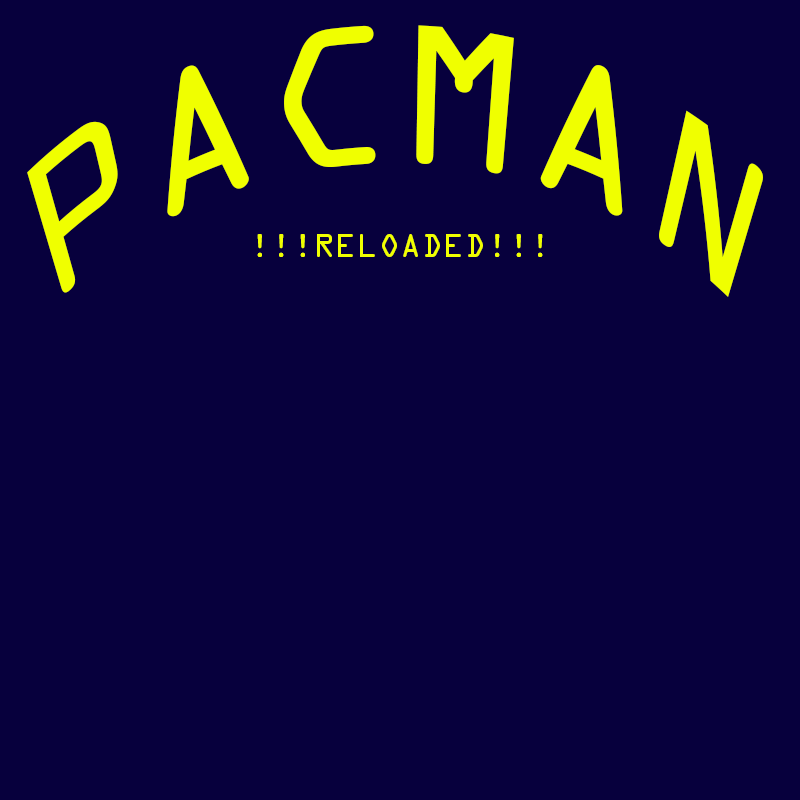
<style>
.page{position:relative;width:800px;height:800px;background:#07003d}
.page>*{position:absolute;margin:0}
.t1{font:140px "OCRAStd";color:#f0ff00}
.t2{font:30px "OCRAStd";color:#f0ff00}
</style>
<div class="page">
<p class="t1" style="left:27px;top:25px;width:736px;height:272px;text-align:center">PACMAN</p>
<p class="t2" style="left:257px;top:234px;width:286px;height:23px">!!!RELOADED!!!</p>
</div>
